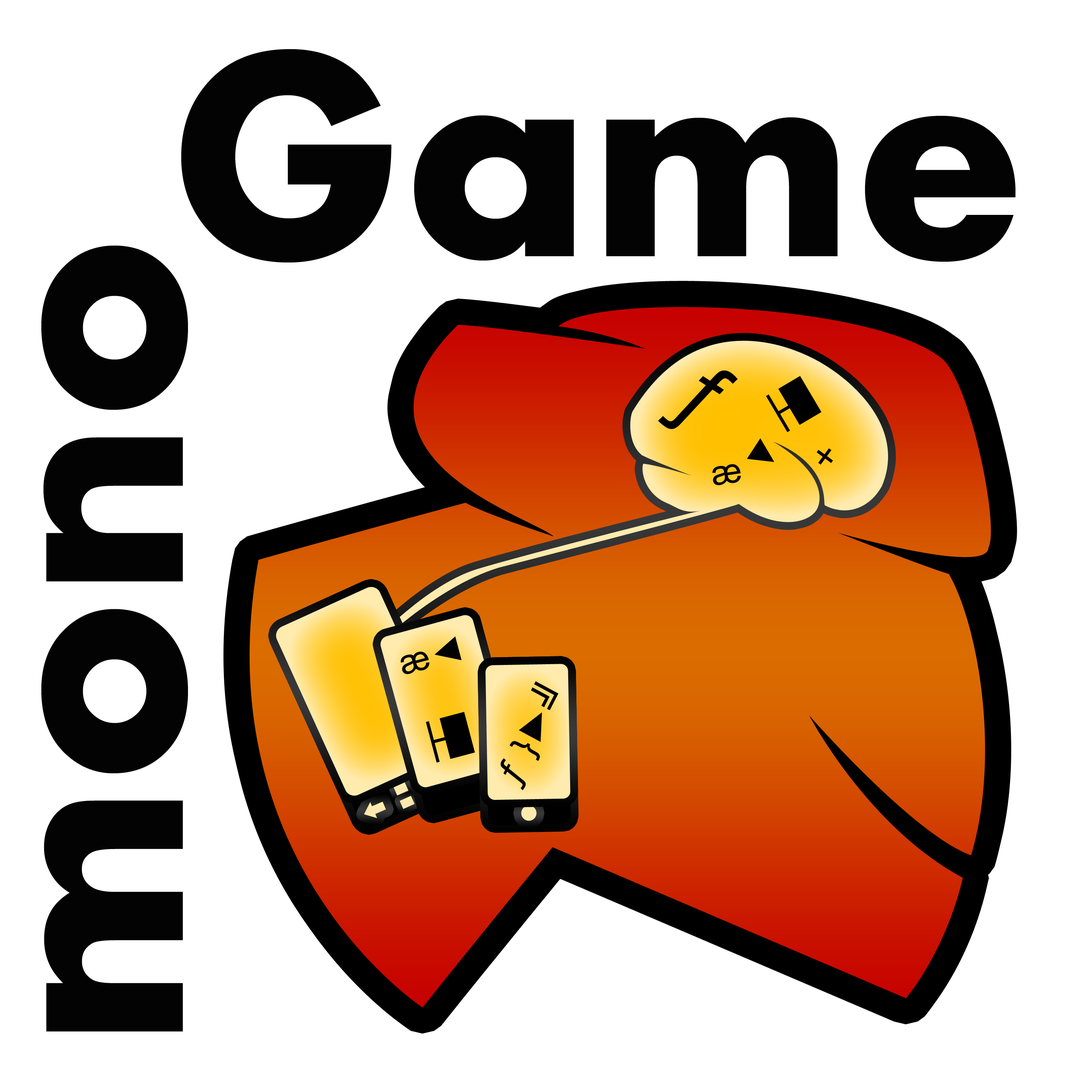
<style>
.page{position:relative;width:1092px;height:1092px;background:#ffffff}
.page>*{position:absolute;margin:0}
.t1{font:301.1px "Aharoni-Bold";color:#030303}
.t2{font:86.2px "ArialMT";color:#000000;font-weight:bold}
.t3{font:34.5px "ArialMT";color:#000000;font-weight:bold}
.t4{font:34.5px "ArialMT";color:#000000;font-weight:bold;scale:1.08 1}
</style>
<div class="page">
<p class="t1" style="left:181px;top:49px;width:835px;height:213px">Game</p>
<p class="t1" style="left:41px;top:245px;width:147px;height:787px;rotate:-90deg">mono</p>
<p class="t2" style="left:658px;top:370px;width:116px;height:92px;rotate:33deg"><span class="t3"> </span>ƒ<span class="t3">    ►</span></p>
<p class="t3" style="left:766px;top:376px;width:55px;height:56px;rotate:-31deg">├█</p>
<p class="t3" style="left:712px;top:448px;width:121px;height:37px;rotate:-9deg">æ       ×</p>
<p class="t3" style="left:401px;top:636px;width:74px;height:127px;rotate:-15deg">æ◄<br><br>├█</p>
<p class="t4" style="left:500px;top:681px;width:58px;height:109px;rotate:-63deg">ƒ }►╝</p>
</div>
